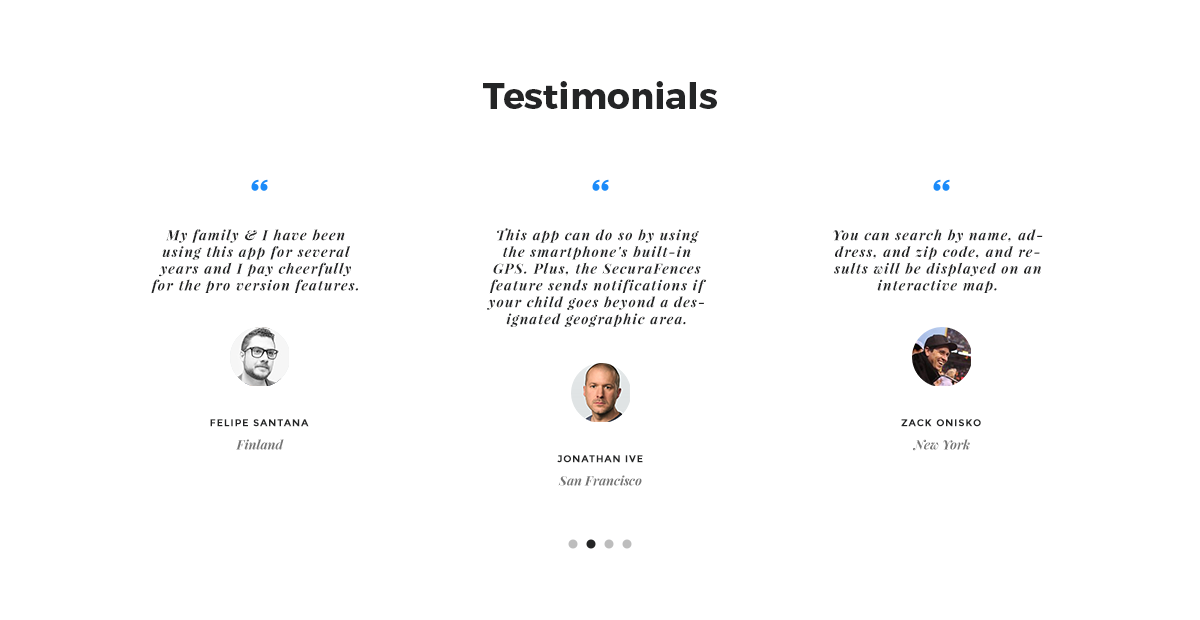
<style>
.page{position:relative;width:1200px;height:620px;background:#ffffff}
.page>*{position:absolute;margin:0}
.t1{font:36px "Montserrat-Bold";color:#242526}
.t2{font:14px "PlayfairDisplay-BoldItalic";letter-spacing:0.08em;color:#242526}
.t3{font:10px "Montserrat-Bold";letter-spacing:0.08em;color:#242526;text-transform:uppercase}
.t4{font:13px "PlayfairDisplay-BoldItalic";color:#747474}
</style>
<div class="page">
<p class="t1" style="left:483px;top:81px;width:234px;height:28px">Testimonials</p>
<p class="t2" style="left:151px;top:229px;width:207px;height:65px;text-align:center">My family &amp; I have been using this app for several years and I pay cheerfully for the pro version features.</p>
<p class="t2" style="left:487px;top:228px;width:219px;height:99px;text-align:center">This app can do so by using the smartphone's built-in GPS. Plus, the SecuraFences feature sends notifications if your child goes beyond a designated geographic area.</p>
<p class="t2" style="left:833px;top:229px;width:210px;height:64px;text-align:center">You can search by name, address, and zip code, and results will be displayed on an interactive map.</p>
<p class="t3" style="left:210px;top:419px;width:99px;height:8px">Felipe Santana</p>
<p class="t3" style="left:901px;top:419px;width:80px;height:8px">Zack Onisko</p>
<p class="t4" style="left:236px;top:439px;width:48px;height:11px">Finland</p>
<p class="t4" style="left:913px;top:439px;width:57px;height:12px">New York</p>
<p class="t3" style="left:557px;top:455px;width:86px;height:8px">Jonathan Ive</p>
<p class="t4" style="left:558px;top:475px;width:84px;height:11px">San Francisco</p>
</div>
